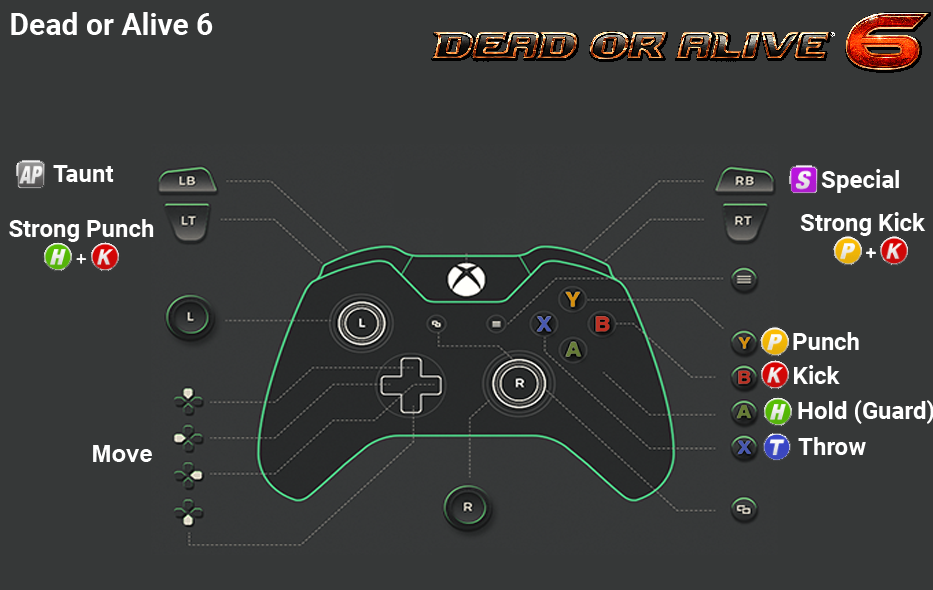
<style>
.page{position:relative;width:933px;height:590px;background:#363838}
.page>*{position:absolute;margin:0}
.t1{font:30px "Roboto-Bold";color:#ffffff}
.t2{font:24px "Roboto-Bold";color:#ffffff}
.t3{font:24px "Arial-BoldMT";color:#fefefe}
</style>
<div class="page">
<p class="t1" style="left:11px;top:12px;width:202px;height:23px">Dead or Alive 6</p>
<p class="t2" style="left:53px;top:165px;width:61px;height:17px">Taunt</p>
<p class="t2" style="left:821px;top:169px;width:78px;height:24px">Special</p>
<p class="t2" style="left:9px;top:219px;width:145px;height:23px">Strong Punch</p>
<p class="t2" style="left:800px;top:212px;width:126px;height:24px">Strong Kick</p>
<p class="t2" style="left:793px;top:332px;width:66px;height:18px">Punch</p>
<p class="t2" style="left:794px;top:365px;width:46px;height:19px">Kick</p>
<p class="t2" style="left:798px;top:400px;width:136px;height:24px">Hold (Guard)</p>
<p class="t2" style="left:798px;top:437px;width:68px;height:18px">Throw</p>
<p class="t3" style="left:93px;top:445px;width:59px;height:17px">Move</p>
</div>
